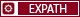
<style>
.page{position:relative;width:80px;height:17px;background:#8a001d}
.page>*{position:absolute;margin:0}
.t1{font:12px "MyriadPro-Regular";color:#ffffff}
</style>
<div class="page">
<p class="t1" style="left:29px;top:4px;width:38px;height:9px">EXPATH</p>
</div>
